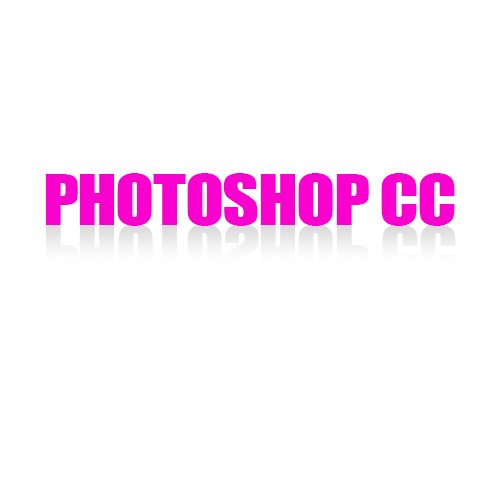
<style>
.page{position:relative;width:500px;height:500px;background:#ffffff}
.page>*{position:absolute;margin:0}
.t1{font:65px "Impact";letter-spacing:-0.02em;color:#fa00ce;text-transform:uppercase;scale:1.1 1}
.t2{font:65.3px "Impact";letter-spacing:-0.02em;color:#f9f8f8;text-transform:uppercase;scale:1.1 1}
</style>
<div class="page">
<p class="t1" style="left:45px;top:173px;width:410px;height:53px">photoshop cc</p>
<p class="t2" style="left:45px;top:224px;width:411px;height:53px">photoshop cc</p>
</div>
